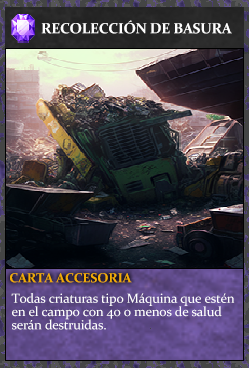
<style>
.page{position:relative;width:249px;height:368px}
.page>*{position:absolute;margin:0}
.t1{font:14.7px "Constantia-Bold";letter-spacing:-0.02em;color:#ffffff}
.t2{font:13.3px "Constantia-Bold";letter-spacing:-0.02em;color:#f2ac05}
.t3{font:13.3px/13.3px "Constantia";letter-spacing:-0.02em;color:#ffffff}
</style>
<div class="page">
<p class="t1" style="left:41px;top:20px;width:191px;height:14px">RECOLECCIÓN DE BASURA</p>
<p class="t2" style="left:10px;top:273px;width:122px;height:10px">CARTA ACCESORIA</p>
<p class="t3" style="left:11px;top:293px;width:224px;height:37px">Todas criaturas tipo Máquina que estén<br>en el campo con 40 o menos de salud<br>serán destruidas.</p>
</div>
